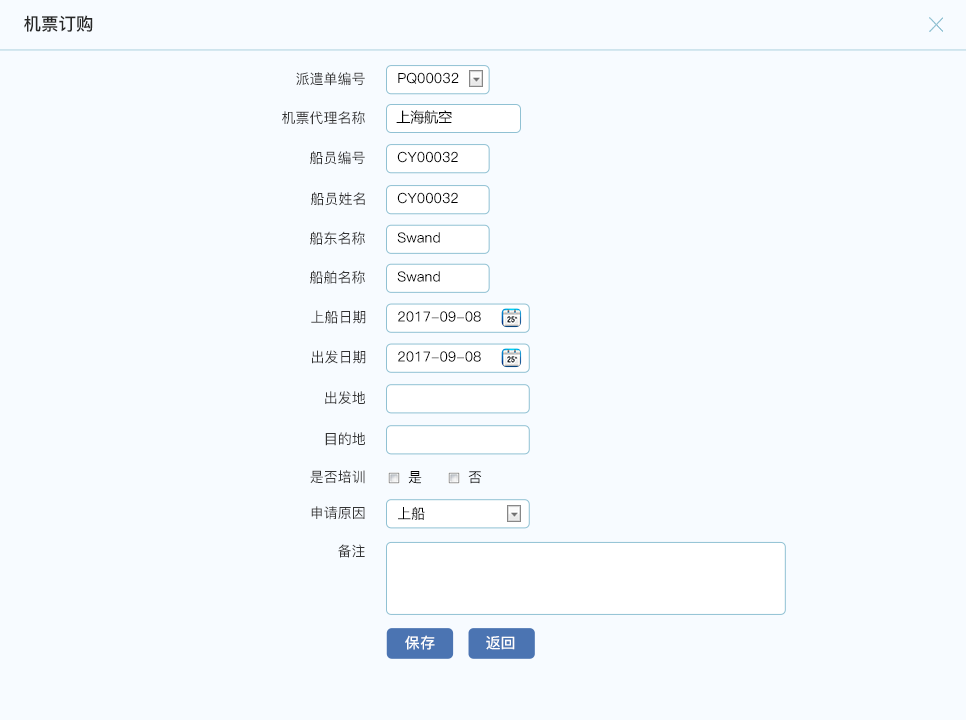
<style>
.page{position:relative;width:966px;height:720px;background:#f7fbff}
.page>*{position:absolute;margin:0}
.t1{font:17.5px "PingFang-SC-Bold";color:#272727}
.t2{font:14px "PingFang-SC-Medium";color:#333333}
.t3{font:14px "PingFang-SC-Medium";color:#000000}
.t4{font:14px "MicrosoftYaHei";color:#020202}
.t5{font:14px "PingFang-SC-Medium"}
.t6{font:14.9px "PingFang-SC-Bold";color:#ffffff}
</style>
<div class="page">
<p class="t1" style="left:24px;top:15px;width:69px;height:17px">机票订购</p>
<p class="t2" style="left:296px;top:72px;width:69px;height:14px">派遣单编号</p>
<p class="t3" style="left:398px;top:72px;width:61px;height:12px">PQ00032</p>
<p class="t2" style="left:282px;top:111px;width:83px;height:14px">机票代理名称</p>
<p class="t4" style="left:396px;top:110px;width:56px;height:14px">上海航空</p>
<p class="t2" style="left:310px;top:151px;width:55px;height:14px">船员编号</p>
<p class="t3" style="left:397px;top:151px;width:61px;height:12px">CY00032</p>
<p class="t2" style="left:311px;top:192px;width:54px;height:14px">船员姓名</p>
<p class="t3" style="left:397px;top:192px;width:61px;height:12px">CY00032</p>
<p class="t2" style="left:310px;top:231px;width:55px;height:14px">船东名称</p>
<p class="t3" style="left:397px;top:232px;width:43px;height:11px">Swand</p>
<p class="t2" style="left:310px;top:270px;width:55px;height:14px">船舶名称</p>
<p class="t3" style="left:397px;top:271px;width:43px;height:11px">Swand</p>
<p class="t2" style="left:311px;top:310px;width:55px;height:14px">上船日期</p>
<p class="t3" style="left:398px;top:311px;width:83px;height:11px">2017-09-08</p>
<p class="t2" style="left:312px;top:350px;width:54px;height:14px">出发日期</p>
<p class="t3" style="left:398px;top:351px;width:83px;height:11px">2017-09-08</p>
<p class="t2" style="left:325px;top:391px;width:40px;height:14px">出发地</p>
<p class="t2" style="left:325px;top:432px;width:40px;height:14px">目的地</p>
<p class="t2" style="left:310px;top:470px;width:55px;height:14px">是否培训</p>
<p class="t3" style="left:408px;top:471px;width:14px;height:13px">是</p>
<p class="t5" style="left:468px;top:471px;width:14px;height:13px">否</p>
<p class="t2" style="left:311px;top:506px;width:54px;height:14px">申请原因</p>
<p class="t3" style="left:398px;top:507px;width:27px;height:13px">上船</p>
<p class="t2" style="left:338px;top:544px;width:27px;height:14px">备注</p>
<p class="t6" style="left:405px;top:635px;width:30px;height:15px">保存</p>
<p class="t6" style="left:486px;top:636px;width:29px;height:14px">返回</p>
</div>
